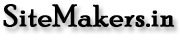
<style>
.page{position:relative;width:180px;height:43px;background:#ffffff}
.page>*{position:absolute;margin:0}
.t1{font:31px "PoorRichard-Regular";letter-spacing:0.01em;color:#000000;font-weight:bold}
</style>
<div class="page">
<p class="t1" style="left:3px;top:4px;width:171px;height:23px">SiteMakers.in</p>
</div>
